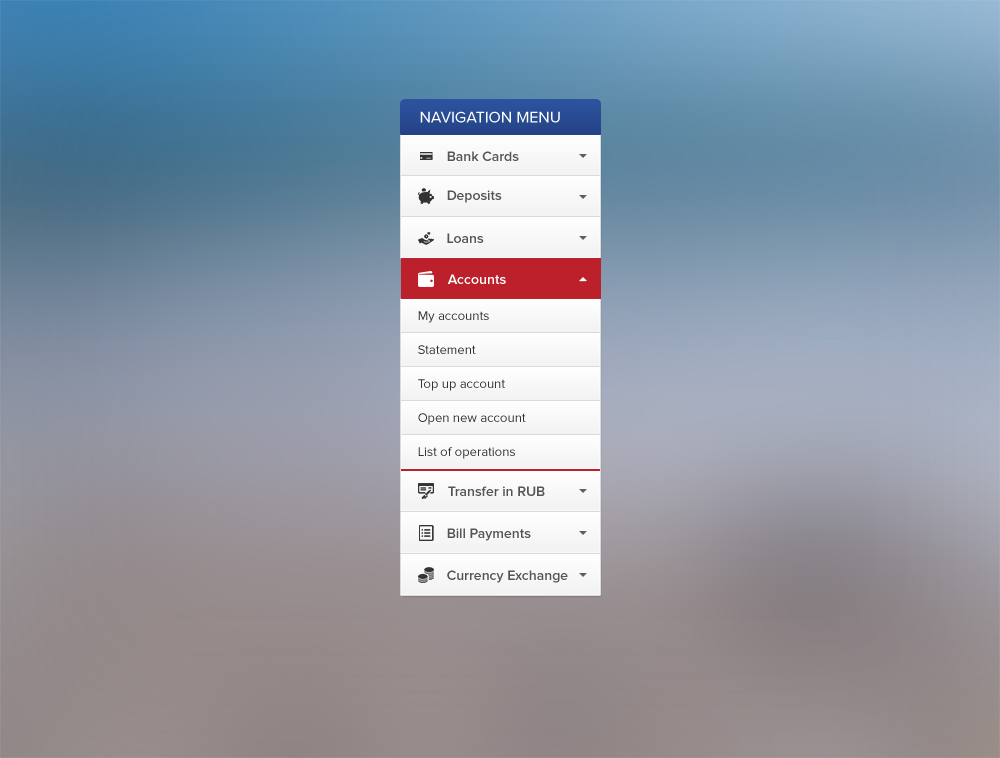
<style>
.page{position:relative;width:1000px;height:758px}
.page>*{position:absolute;margin:0}
.t1{font:16px "ProximaNova-Regular";color:#ffffff;text-transform:uppercase}
.t2{font:14px "ProximaNova-Semibold";color:#545558}
.t3{font:14px "ProximaNova-Semibold";color:#ffffff}
.t4{font:13px/34px "ProximaNova-Regular";color:#333333}
</style>
<div class="page">
<p class="t1" style="left:420px;top:111px;width:140px;height:12px">Navigation Menu</p>
<p class="t2" style="left:447px;top:151px;width:72px;height:10px">Bank Cards</p>
<p class="t2" style="left:447px;top:190px;width:55px;height:13px">Deposits</p>
<p class="t2" style="left:447px;top:233px;width:37px;height:10px">Loans</p>
<p class="t3" style="left:447px;top:274px;width:59px;height:10px">Accounts</p>
<p class="t4" style="left:418px;top:311px;width:108px;height:148px">My accounts<br>Statement<br>Top up account<br>Open new account<br>List of operations</p>
<p class="t2" style="left:448px;top:486px;width:97px;height:10px">Transfer in RUB</p>
<p class="t2" style="left:447px;top:528px;width:84px;height:13px">Bill Payments</p>
<p class="t2" style="left:447px;top:570px;width:121px;height:13px">Currency Exchange</p>
</div>
